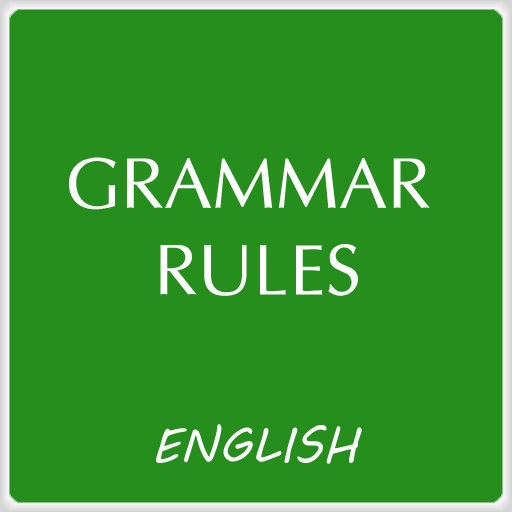
<style>
.page{position:relative;width:512px;height:512px;background:#258e1d}
.page>*{position:absolute;margin:0}
.t1{font:72px "VPS-Can-Tho-Hoa";color:#ffffff}
.t2{font:48px "MVBoli";color:#ffffff}
</style>
<div class="page">
<p class="t1" style="left:69px;top:157px;width:361px;height:139px;text-align:center">Grammar <br>Rules</p>
<p class="t2" style="left:156px;top:424px;width:206px;height:40px">ENGLISH</p>
</div>
